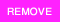
<style>
.page{position:relative;width:60px;height:22px;background:#ff22fe}
.page>*{position:absolute;margin:0}
.t1{font:10px "HelveticaLTStd-Roman";letter-spacing:0.025em;color:#ffffff}
</style>
<div class="page">
<p class="t1" style="left:7px;top:7px;width:45px;height:9px">REMOVE</p>
</div>
